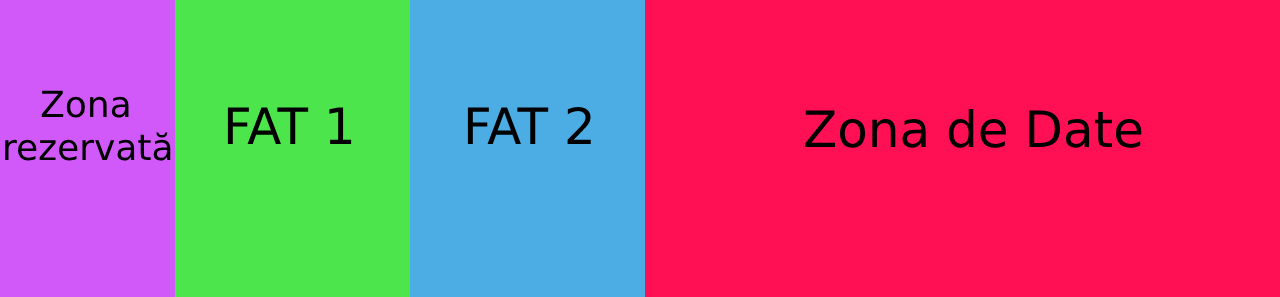
<style>
.page{position:relative;width:1280px;height:297px;background:#ff0f53}
.page>*{position:absolute;margin:0}
.t1{font:36px "DejaVuSans";color:#000000}
.t2{font:30px "DejaVuSans";color:#000000}
.t3{font:50px "DejaVuSans";color:#000000}
</style>
<div class="page">
<p class="t1" style="left:5px;top:90px;width:166px;height:71px"><span class="t2">    </span>Zona<br>rezervată</p>
<p class="t3" style="left:227px;top:107px;width:125px;height:37px">FAT 1</p>
<p class="t3" style="left:467px;top:106px;width:124px;height:38px">FAT 2</p>
<p class="t3" style="left:805px;top:109px;width:337px;height:39px">Zona de Date</p>
</div>
